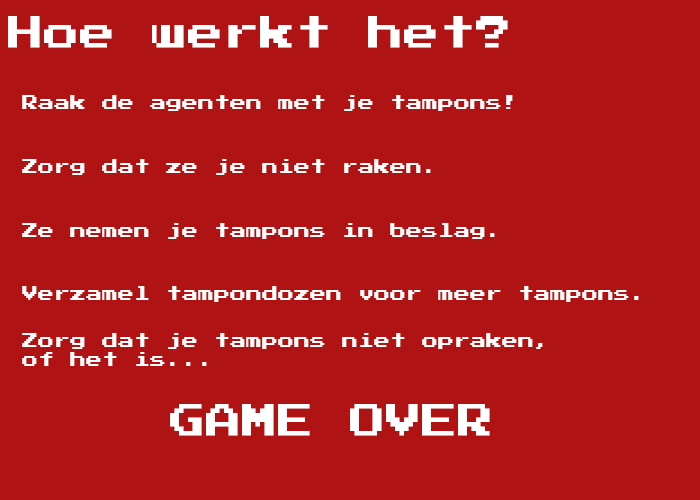
<style>
.page{position:relative;width:700px;height:500px;background:#b01313}
.page>*{position:absolute;margin:0}
.t1{font:36px "PressStart2P";color:#ffffff}
.t2{font:16px "PressStart2P";color:#ffffff}
</style>
<div class="page">
<p class="t1" style="left:8px;top:16px;width:500px;height:32px">Hoe werkt het?</p>
<p class="t2" style="left:22px;top:95px;width:491px;height:16px">Raak de agenten met je tampons!</p>
<p class="t2" style="left:22px;top:159px;width:409px;height:16px">Zorg dat ze je niet raken.</p>
<p class="t2" style="left:22px;top:223px;width:473px;height:16px">Ze nemen je tampons in beslag.</p>
<p class="t2" style="left:22px;top:286px;width:617px;height:16px">Verzamel tampondozen voor meer tampons.</p>
<p class="t2" style="left:22px;top:333px;width:521px;height:33px">Zorg dat je tampons niet opraken,<br>of het is...</p>
<p class="t1" style="left:170px;top:404px;width:320px;height:32px">GAME OVER</p>
</div>
